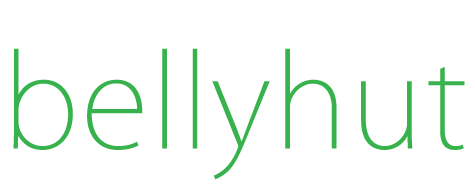
<style>
.page{position:relative;width:475px;height:189px;background:#ffffff}
.page>*{position:absolute;margin:0}
.t1{font:125px "KozGoPro-ExtraLight";letter-spacing:0.02em;color:#37b24d}
</style>
<div class="page">
<p class="t1" style="left:13px;top:48px;width:452px;height:132px">bellyhut</p>
</div>
